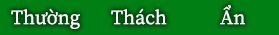
<style>
.page{position:relative;width:279px;height:35px;background:#007f15}
.page>*{position:absolute;margin:0}
.t1{font:20px "SourceSerifRoman-Regular";color:#ffffff}
</style>
<div class="page">
<p class="t1" style="left:220px;top:5px;width:25px;height:20px">Ẩn</p>
<p class="t1" style="left:11px;top:8px;width:69px;height:21px">Thường</p>
<p class="t1" style="left:111px;top:8px;width:56px;height:17px">Thách</p>
</div>
